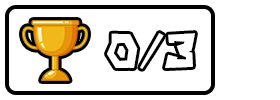
<style>
.page{position:relative;width:280px;height:100px;background:#ffffff}
.page>*{position:absolute;margin:0}
.t1{font:50px "SUPERGAME";color:#ffffff}
</style>
<div class="page">
<p class="t1" style="left:107px;top:33px;width:88px;height:36px">0/3</p>
</div>
